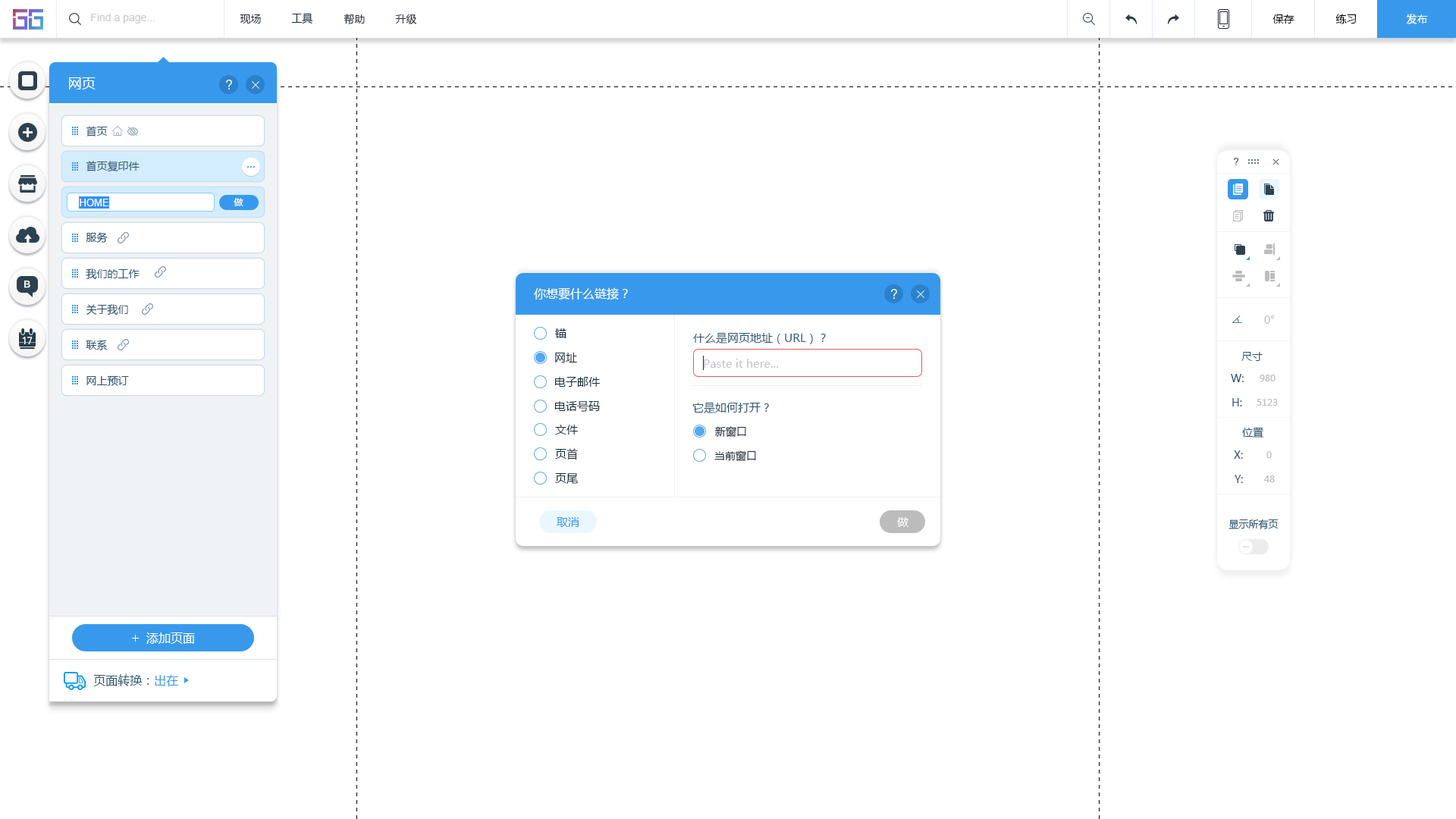
<style>
.page{position:relative;width:1456px;height:819px;background:#ffffff}
.page>*{position:absolute;margin:0}
.t1{font:10.6px "ArialMT";color:#cccccc}
.t2{font:10.6px "MicrosoftYaHei";color:#20303c}
.t3{font:10.6px "MicrosoftYaHei";color:#000000}
.t4{font:10.6px "MicrosoftYaHei";color:#ffffff}
.t5{font:13.6px "MicrosoftYaHei";color:#ffffff}
.t6{font:10.6px "MicrosoftYaHei";color:#2b5672}
.t7{font:9.1px "MicrosoftYaHei";color:#ffffff}
.t8{font:9.9px "ArialMT";color:#ffffff}
.t9{font:12.1px "MicrosoftYaHei";color:#ffffff}
.t10{font:10.6px "MicrosoftYaHei";color:#bcbcbc}
.t11{font:11.4px "MicrosoftYaHei";color:#162d3d}
.t12{font:11.4px "MicrosoftYaHei";color:#2b5672}
.t13{font:11.4px "MicrosoftYaHei";color:#c5c1cd}
.t14{font:9.1px "MicrosoftYaHei";color:#bcbcbc}
.t15{font:10.6px "MicrosoftYaHei";color:#162d3d}
.t16{font:11.4px "MicrosoftYaHei";color:#3899ec}
.t17{font:11.4px "MicrosoftYaHei";color:#ffffff}
.t18{font:9.9px "MicrosoftYaHei";color:#2b5672}
.t19{font:9.1px "MicrosoftYaHei";color:#2b5672}
.t20{font:9.1px "MicrosoftYaHei";color:#3899ec}
</style>
<div class="page">
<p class="t1" style="left:91px;top:14px;width:64px;height:10px">Find a page...</p>
<p class="t2" style="left:240px;top:14px;width:21px;height:10px">现场</p>
<p class="t2" style="left:291px;top:13px;width:22px;height:11px">工具</p>
<p class="t2" style="left:344px;top:14px;width:21px;height:11px">帮助</p>
<p class="t2" style="left:395px;top:14px;width:22px;height:10px">升级</p>
<p class="t3" style="left:1272px;top:14px;width:22px;height:10px">保存</p>
<p class="t3" style="left:1335px;top:14px;width:22px;height:10px">练习</p>
<p class="t4" style="left:1406px;top:14px;width:22px;height:10px">发布</p>
<p class="t5" style="left:69px;top:77px;width:27px;height:12px">网页</p>
<p class="t6" style="left:86px;top:126px;width:22px;height:10px">首页</p>
<p class="t6" style="left:86px;top:161px;width:54px;height:11px">首页复印件</p>
<p class="t7" style="left:234px;top:198px;width:9px;height:8px">做</p>
<p class="t8" style="left:80px;top:199px;width:29px;height:7px">HOME</p>
<p class="t6" style="left:86px;top:232px;width:22px;height:11px">服务</p>
<p class="t6" style="left:86px;top:268px;width:54px;height:12px">我们的工作</p>
<p class="t9" style="left:534px;top:287px;width:94px;height:13px">你想要什么链接？</p>
<p class="t6" style="left:86px;top:304px;width:42px;height:11px">关于我们</p>
<p class="t10" style="left:1264px;top:315px;width:11px;height:9px">0°</p>
<p class="t11" style="left:555px;top:328px;width:11px;height:10px">锚</p>
<p class="t6" style="left:86px;top:340px;width:21px;height:10px">联系</p>
<p class="t12" style="left:693px;top:332px;width:133px;height:12px">什么是网页地址（URL）？</p>
<p class="t11" style="left:555px;top:353px;width:22px;height:9px">网址</p>
<p class="t6" style="left:1241px;top:352px;width:22px;height:9px">尺寸</p>
<p class="t13" style="left:704px;top:359px;width:74px;height:9px">Paste it here...</p>
<p class="t6" style="left:86px;top:375px;width:43px;height:11px">网上预订</p>
<p class="t11" style="left:554px;top:377px;width:46px;height:10px">电子邮件</p>
<p class="t6" style="left:1231px;top:374px;width:13px;height:8px">W:</p>
<p class="t14" style="left:1260px;top:375px;width:15px;height:6px">980</p>
<p class="t11" style="left:554px;top:401px;width:46px;height:11px">电话号码</p>
<p class="t12" style="left:692px;top:402px;width:77px;height:11px">它是如何打开？</p>
<p class="t6" style="left:1232px;top:398px;width:10px;height:8px">H:</p>
<p class="t14" style="left:1257px;top:399px;width:21px;height:7px">5123</p>
<p class="t11" style="left:555px;top:425px;width:23px;height:10px">文件</p>
<p class="t15" style="left:715px;top:426px;width:31px;height:11px">新窗口</p>
<p class="t6" style="left:1242px;top:427px;width:22px;height:11px">位置</p>
<p class="t11" style="left:555px;top:448px;width:23px;height:12px">页首</p>
<p class="t15" style="left:714px;top:450px;width:42px;height:11px">当前窗口</p>
<p class="t6" style="left:1234px;top:450px;width:9px;height:9px">X:</p>
<p class="t14" style="left:1266px;top:451px;width:6px;height:7px">0</p>
<p class="t11" style="left:555px;top:473px;width:23px;height:11px">页尾</p>
<p class="t6" style="left:1235px;top:475px;width:8px;height:8px">Y:</p>
<p class="t14" style="left:1264px;top:475px;width:11px;height:7px">48</p>
<p class="t16" style="left:557px;top:517px;width:22px;height:10px">取消</p>
<p class="t17" style="left:897px;top:517px;width:11px;height:10px">做</p>
<p class="t18" style="left:1228px;top:519px;width:51px;height:10px">显示所有页</p>
<p class="t9" style="left:146px;top:632px;width:49px;height:12px">添加页面</p>
<p class="t19" style="left:93px;top:674px;width:86px;height:12px">页面转换：<span class="t20">出在</span></p>
</div>
